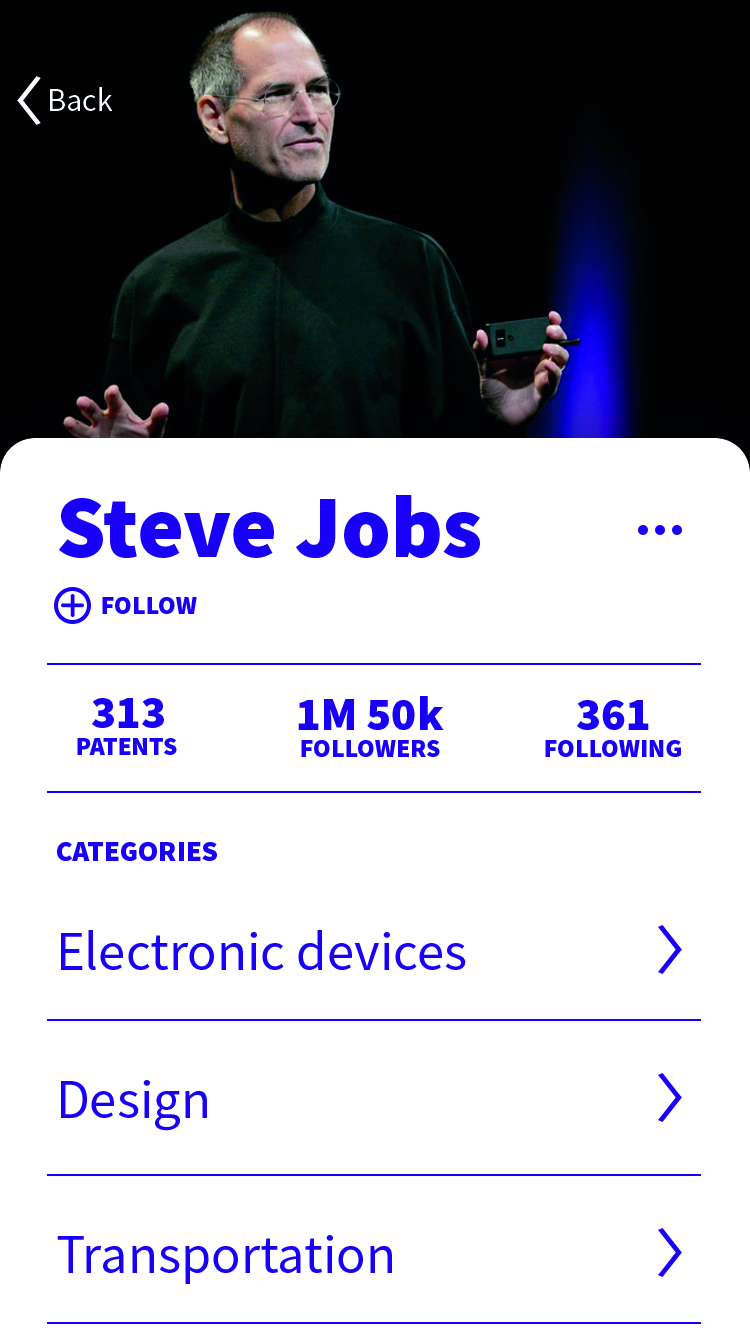
<style>
.page{position:relative;width:750px;height:1334px;background:#ffffff}
.page>*{position:absolute;margin:0}
.t1{font:32.7px "SourceSansPro-Regular";color:#ffffff}
.t2{font:88.9px "SourceSansPro-Black";color:#1700f8}
.t3{font:25.7px "SourceSansPro-Black";color:#1700f8}
.t4{font:46.5px "SourceSansPro-Black";color:#1700f8}
.t5{font:28.9px "SourceSansPro-Black";color:#1700f8}
.t6{font:54.8px "SourceSansPro-Regular";color:#1700f8}
</style>
<div class="page">
<p class="t1" style="left:50px;top:87px;width:63px;height:24px">Back</p>
<p class="t2" style="left:59px;top:495px;width:421px;height:63px">Steve Jobs</p>
<p class="t3" style="left:102px;top:597px;width:95px;height:17px">FOLLOW</p>
<p class="t4" style="left:92px;top:698px;width:72px;height:30px">313</p>
<p class="t4" style="left:298px;top:696px;width:146px;height:34px">1M 50k</p>
<p class="t4" style="left:577px;top:700px;width:72px;height:30px">361</p>
<p class="t3" style="left:77px;top:738px;width:100px;height:17px">PATENTS</p>
<p class="t3" style="left:301px;top:740px;width:139px;height:17px">FOLLOWERS</p>
<p class="t3" style="left:545px;top:740px;width:136px;height:17px">FOLLOWING</p>
<p class="t5" style="left:57px;top:842px;width:160px;height:19px">CATEGORIES</p>
<p class="t6" style="left:61px;top:930px;width:405px;height:40px">Electronic devices</p>
<p class="t6" style="left:61px;top:1080px;width:146px;height:51px">Design</p>
<p class="t6" style="left:57px;top:1235px;width:335px;height:49px">Transportation</p>
</div>
